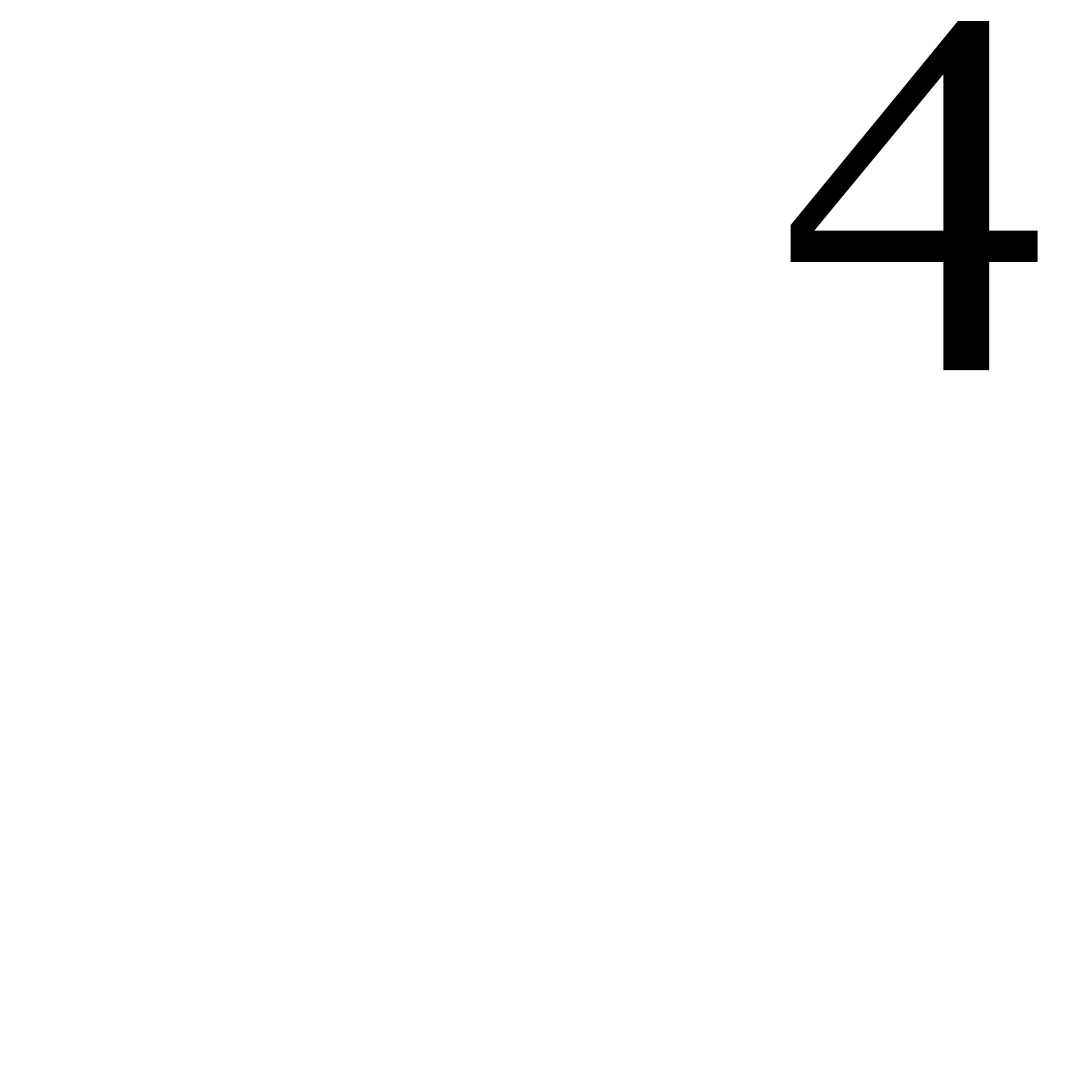
<style>
.page{position:relative;width:1080px;height:1080px;background:#ffffff}
.page>*{position:absolute;margin:0}
.t1{font:488.3px "Georgia";color:#000000}
</style>
<div class="page">
<p class="t1" style="left:790px;top:21px;width:248px;height:350px">4</p>
</div>
